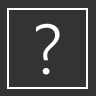
<style>
.page{position:relative;width:96px;height:96px;background:#333333}
.page>*{position:absolute;margin:0}
.t1{font:70.8px "SegoeUI-Semilight";color:#ffffff}
</style>
<div class="page">
<p class="t1" style="left:36px;top:23px;width:24px;height:52px">?</p>
</div>
